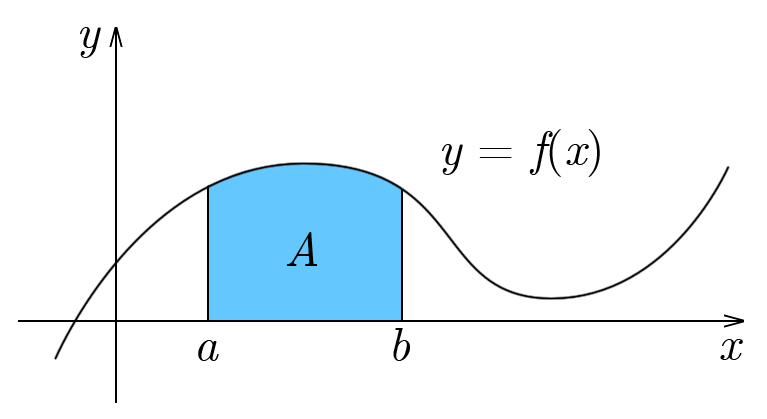
<style>
.page{position:relative;width:767px;height:419px;background:#ffffff}
.page>*{position:absolute;margin:0}
.t1{font:48px "CMUSerif-Italic";color:#000000}
.t2{font:48px "CMUSerif-Roman";color:#000000}
</style>
<div class="page">
<p class="t1" style="left:80px;top:27px;width:21px;height:31px">y</p>
<p class="t1" style="left:442px;top:129px;width:158px;height:48px">y<span class="t2"> = </span>f<span class="t2">(</span>x<span class="t2">)</span></p>
<p class="t1" style="left:286px;top:232px;width:32px;height:34px">A</p>
<p class="t1" style="left:393px;top:328px;width:17px;height:33px">b</p>
<p class="t1" style="left:198px;top:340px;width:21px;height:21px">a</p>
<p class="t1" style="left:720px;top:339px;width:23px;height:21px">x</p>
</div>
